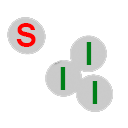
<style>
.page{position:relative;width:128px;height:128px;background:#ffffff}
.page>*{position:absolute;margin:0}
.t1{font:36px "Raavi-Bold";color:#ff0000}
.t2{font:36px "Raavi-Bold";color:#008018}
</style>
<div class="page">
<p class="t1" style="left:16px;top:23px;width:20px;height:24px">S</p>
<p class="t2" style="left:86px;top:42px;width:6px;height:23px">I</p>
<p class="t2" style="left:60px;top:67px;width:6px;height:23px">I</p>
<p class="t2" style="left:92px;top:81px;width:6px;height:23px">I</p>
</div>
